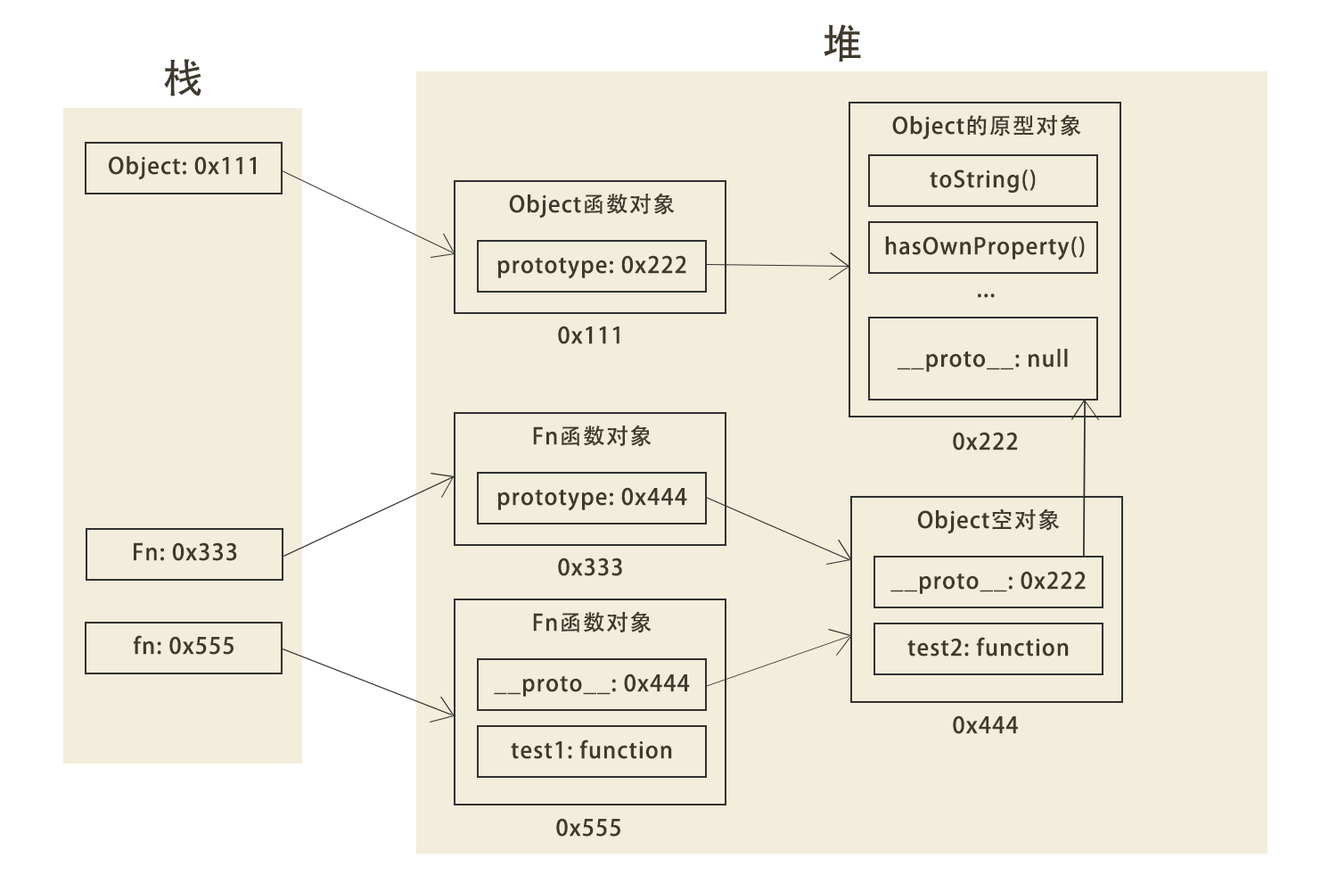
<style>
.page{position:relative;width:1337px;height:892px;background:#f3eddb}
.page>*{position:absolute;margin:0}
.t1{font:40.1px "AdobeHeitiStd-Regular";letter-spacing:-0.15em;color:#3f3a2d}
.t2{font:22.3px "AdobeHeitiStd-Regular";letter-spacing:0.05em;color:#3f3a2d}
</style>
<div class="page">
<p class="t1" style="left:824px;top:24px;width:37px;height:38px">堆</p>
<p class="t1" style="left:164px;top:59px;width:38px;height:37px">栈</p>
<p class="t2" style="left:892px;top:114px;width:190px;height:25px">Object的原型对象</p>
<p class="t2" style="left:109px;top:156px;width:147px;height:23px">Object: 0x111</p>
<p class="t2" style="left:930px;top:169px;width:106px;height:24px">toString()</p>
<p class="t2" style="left:509px;top:193px;width:166px;height:25px">Object函数对象</p>
<p class="t2" style="left:885px;top:236px;width:200px;height:24px">hasOwnProperty()</p>
<p class="t2" style="left:498px;top:255px;width:189px;height:24px">prototype: 0x222</p>
<p class="t2" style="left:978px;top:293px;width:17px;height:5px">...</p>
<p class="t2" style="left:558px;top:325px;width:62px;height:19px">0x111</p>
<p class="t2" style="left:897px;top:349px;width:171px;height:23px">__proto__: null</p>
<p class="t2" style="left:533px;top:424px;width:119px;height:23px">Fn函数对象</p>
<p class="t2" style="left:953px;top:432px;width:65px;height:18px">0x222</p>
<p class="t2" style="left:498px;top:487px;width:189px;height:24px">prototype: 0x444</p>
<p class="t2" style="left:917px;top:508px;width:143px;height:25px">Object空对象</p>
<p class="t2" style="left:134px;top:542px;width:103px;height:19px">Fn: 0x333</p>
<p class="t2" style="left:558px;top:557px;width:64px;height:19px">0x333</p>
<p class="t2" style="left:891px;top:571px;width:195px;height:23px">__proto__: 0x222</p>
<p class="t2" style="left:533px;top:611px;width:119px;height:22px">Fn函数对象</p>
<p class="t2" style="left:133px;top:635px;width:101px;height:19px">fn: 0x555</p>
<p class="t2" style="left:908px;top:637px;width:161px;height:19px">test2: function</p>
<p class="t2" style="left:494px;top:673px;width:196px;height:23px">__proto__: 0x444</p>
<p class="t2" style="left:953px;top:715px;width:65px;height:19px">0x444</p>
<p class="t2" style="left:511px;top:739px;width:161px;height:20px">test1: function</p>
<p class="t2" style="left:556px;top:818px;width:65px;height:18px">0x555</p>
</div>
